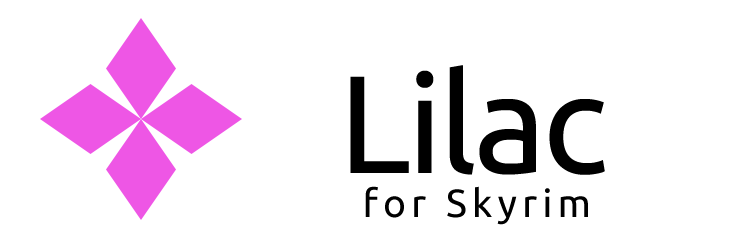
<style>
.page{position:relative;width:750px;height:250px;background:#ffffff}
.page>*{position:absolute;margin:0}
.t1{font:139px "Ubuntu";letter-spacing:-0.025em;color:#000000}
.t2{font:39px "Ubuntu";letter-spacing:0.135em;color:#000000}
</style>
<div class="page">
<p class="t1" style="left:350px;top:65px;width:255px;height:110px">Lilac</p>
<p class="t2" style="left:365px;top:186px;width:223px;height:39px">for Skyrim</p>
</div>
